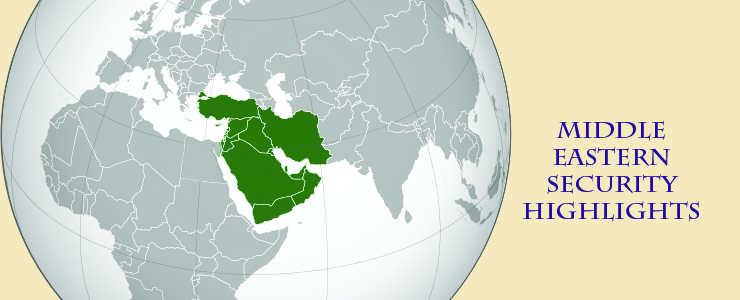
<style>
.page{position:relative;width:740px;height:300px;background:#f4eabe}
.page>*{position:absolute;margin:0}
.t1{font:22.4px "CharlemagneStd-Bold";color:#2108a6;scale:1.07 1}
</style>
<div class="page">
<p class="t1" style="left:523px;top:120px;width:176px;height:102px">Middle <br>Eastern<br>Security<br>highlights</p>
</div>
